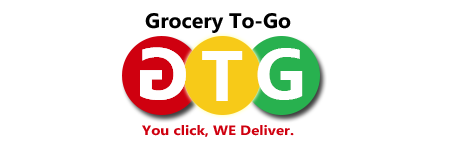
<style>
.page{position:relative;width:450px;height:150px;background:#ffffff}
.page>*{position:absolute;margin:0}
.t1{font:21px "Ebrima-Bold";color:#000000}
.t2{font:72.1px "Ebrima-Bold";color:#ffffff}
.t3{font:13.4px "Ebrima-Bold";color:#cf000f;scale:1.12 1}
</style>
<div class="page">
<p class="t1" style="left:145px;top:13px;width:146px;height:20px">Grocery To-Go</p>
<p class="t2" style="left:140px;top:47px;width:46px;height:53px;rotate:180deg">G</p>
<p class="t2" style="left:140px;top:47px;width:46px;height:53px;rotate:180deg">G</p>
<p class="t2" style="left:202px;top:51px;width:41px;height:50px">T</p>
<p class="t2" style="left:257px;top:48px;width:46px;height:52px">G</p>
<p class="t3" style="left:142px;top:125px;width:152px;height:12px">.You click, WE Deliver</p>
</div>
